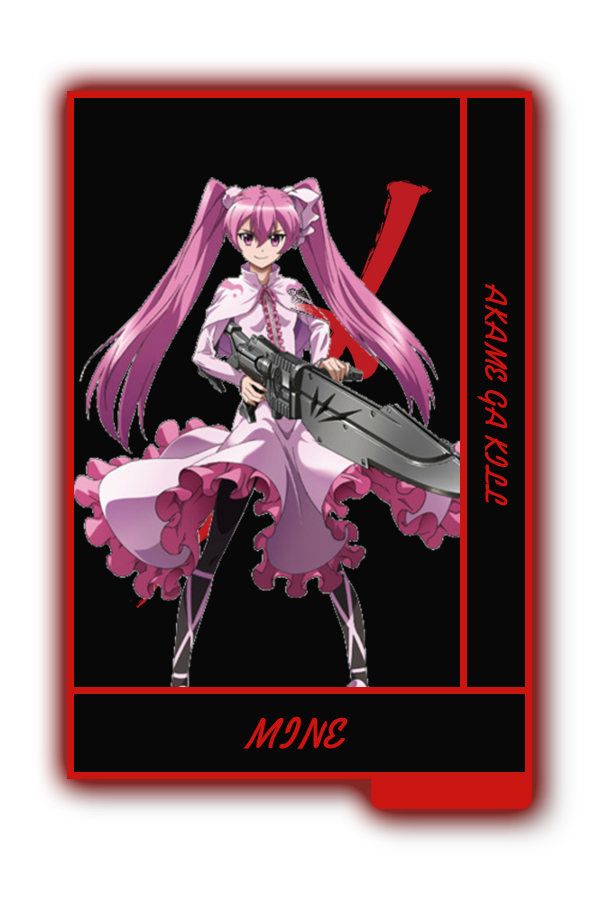
<style>
.page{position:relative;width:600px;height:900px;background:#080808}
.page>*{position:absolute;margin:0}
.t1{font:31.2px "Alako-Bold";color:#cb1511}
.t2{font:43.2px "Alako-Bold";color:#cb1511}
</style>
<div class="page">
<p class="t1" style="left:477px;top:283px;width:31px;height:223px;rotate:90deg">AKAME GA KILL</p>
<p class="t2" style="left:243px;top:716px;width:105px;height:33px">MINE</p>
</div>
